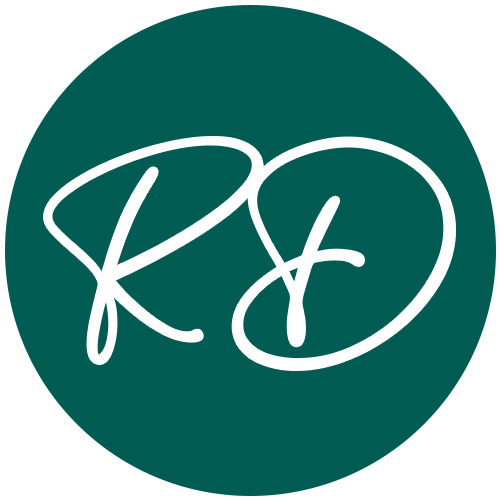
<style>
.page{position:relative;width:500px;height:500px;background:#005c53}
.page>*{position:absolute;margin:0}
.t1{font:179.6px "Bacalisties";color:#ffffff}
</style>
<div class="page">
<p class="t1" style="left:46px;top:139px;width:408px;height:229px">RD</p>
</div>
